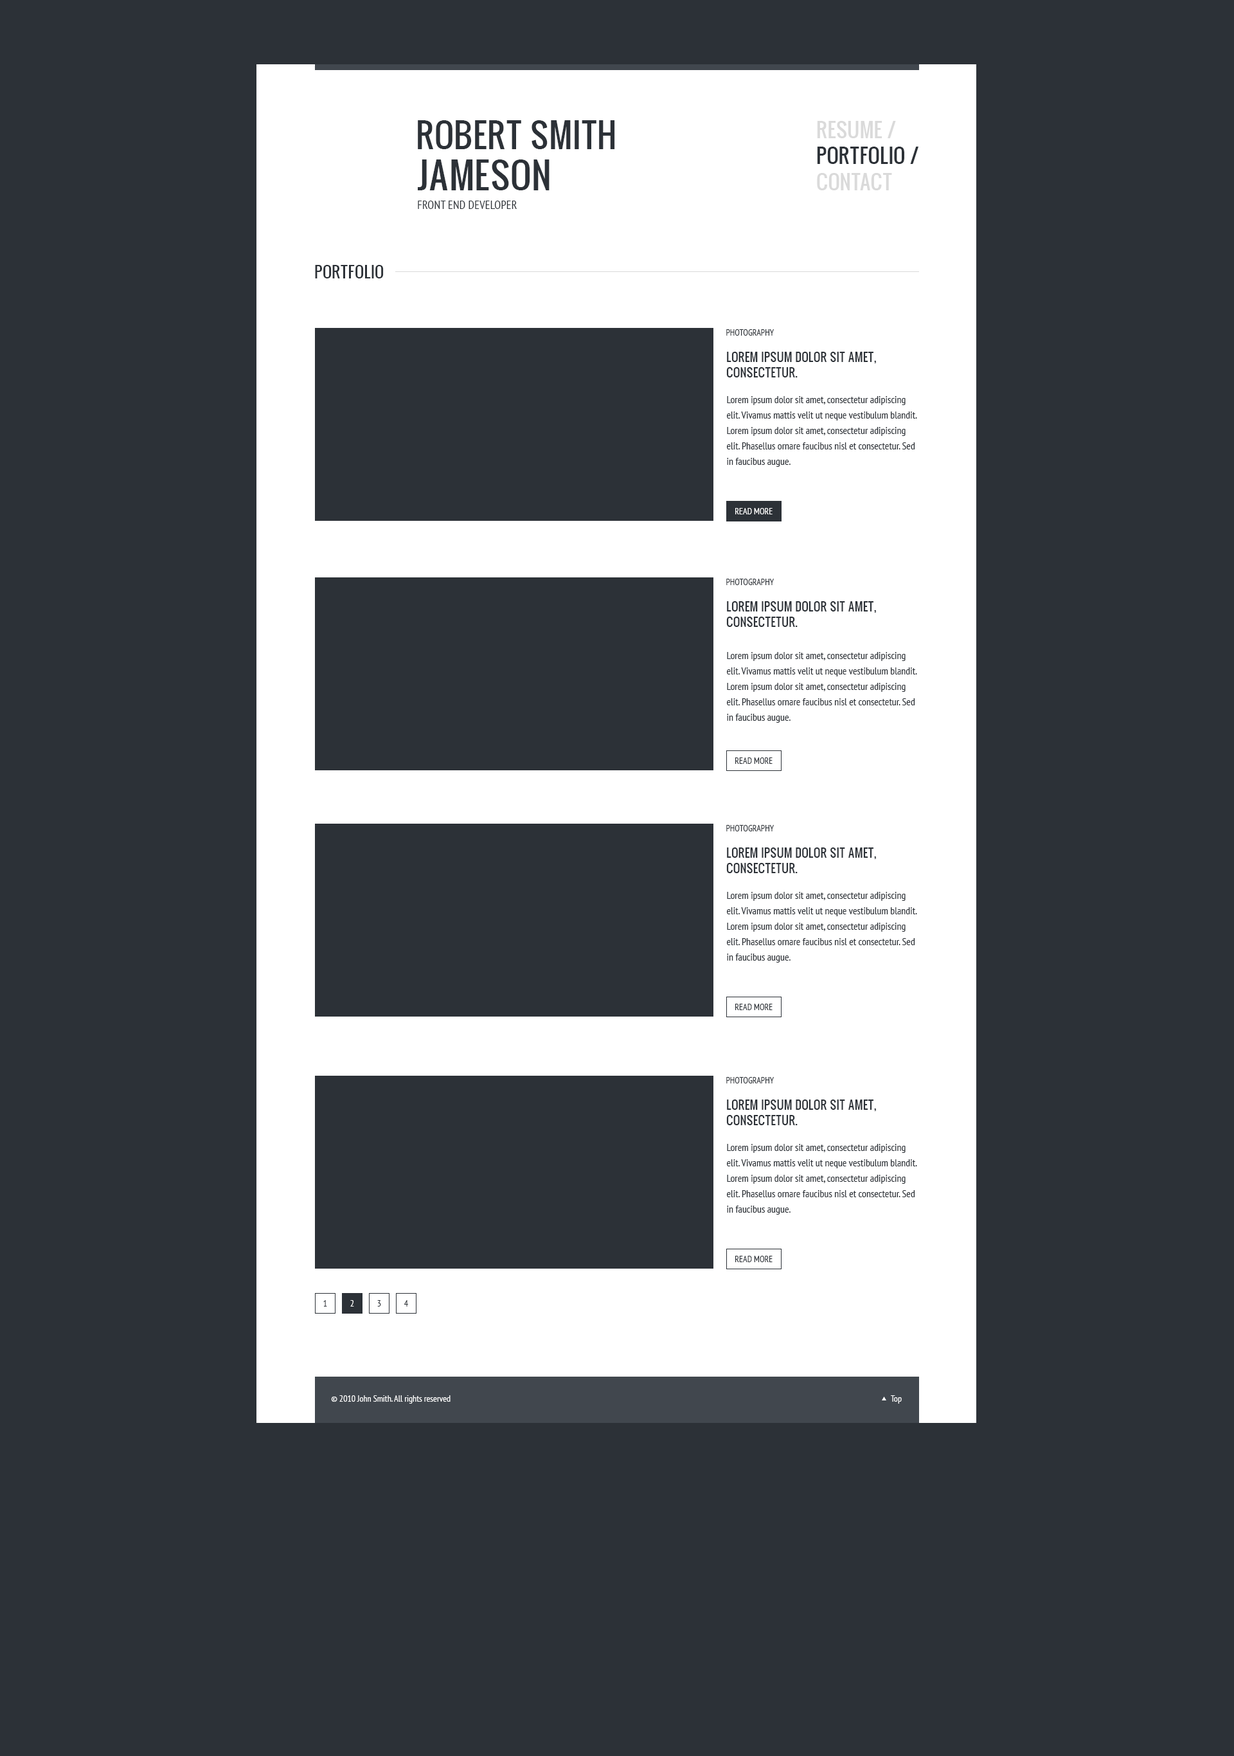
<style>
.page{position:relative;width:1234px;height:1756px;background:#2c3137}
.page>*{position:absolute;margin:0}
.t1{font:32.8px "Oswald";color:#2c3137;text-transform:uppercase}
.t2{font:19.7px/26.2px "Oswald";color:#2c3137}
.t3{font:19.7px/26.2px "Oswald";color:#dadada}
.t4{font:35.6px "Oswald";color:#2c3137;text-transform:uppercase}
.t5{font:35.6px "Oswald";color:#222222;text-transform:uppercase}
.t6{font:11.9px "PTSans-Narrow";color:#2c3137}
.t7{font:15.4px "Oswald";color:#2c3137}
.t8{font:9px "PTSans-Narrow";color:#2c3137;text-transform:uppercase}
.t9{font:11.6px/15.4px "Oswald";color:#2c3137;text-transform:uppercase}
.t10{font:10.3px/15.4px "PTSans-Narrow";color:#2c3137}
.t11{font:9px "PTSans-Narrow";color:#ffffff}
.t12{font:9px "PTSans-Narrow";color:#2c3137}
</style>
<div class="page">
<p class="t1" style="left:418px;top:120px;width:197px;height:29px">ROBERT Smith</p>
<p class="t2" style="left:817px;top:121px;width:102px;height:69px"><span class="t3">RESUME /  <br></span>PORTFOLIO / <br><span class="t3">CONTACT</span></p>
<p class="t4" style="left:418px;top:159px;width:132px;height:31px"><span class="t5"><br></span>jAMESON</p>
<p class="t6" style="left:418px;top:201px;width:99px;height:8px">FRONT END DEVELOPER</p>
<p class="t7" style="left:315px;top:265px;width:69px;height:13px">PORTFOLIO</p>
<p class="t8" style="left:726px;top:329px;width:49px;height:7px">photography</p>
<p class="t9" style="left:726px;top:352px;width:150px;height:25px">Lorem ipsum dolor sit amet, <br>consectetur.</p>
<p class="t10" style="left:727px;top:396px;width:190px;height:71px">Lorem ipsum dolor sit amet, consectetur adipiscing elit. Vivamus mattis velit ut neque vestibulum blandit. Lorem ipsum dolor sit amet, consectetur adipiscing elit. Phasellus ornare faucibus nisl et consectetur. Sed in faucibus augue.</p>
<p class="t11" style="left:735px;top:508px;width:38px;height:6px">READ MORE</p>
<p class="t8" style="left:726px;top:579px;width:49px;height:6px">photography</p>
<p class="t9" style="left:726px;top:601px;width:150px;height:26px">Lorem ipsum dolor sit amet, <br>consectetur.</p>
<p class="t10" style="left:727px;top:652px;width:190px;height:71px">Lorem ipsum dolor sit amet, consectetur adipiscing elit. Vivamus mattis velit ut neque vestibulum blandit. Lorem ipsum dolor sit amet, consectetur adipiscing elit. Phasellus ornare faucibus nisl et consectetur. Sed in faucibus augue.</p>
<p class="t12" style="left:735px;top:757px;width:38px;height:7px">READ MORE</p>
<p class="t8" style="left:726px;top:825px;width:49px;height:6px">photography</p>
<p class="t9" style="left:726px;top:847px;width:150px;height:26px">Lorem ipsum dolor sit amet, <br>consectetur.</p>
<p class="t10" style="left:727px;top:892px;width:190px;height:70px">Lorem ipsum dolor sit amet, consectetur adipiscing elit. Vivamus mattis velit ut neque vestibulum blandit. Lorem ipsum dolor sit amet, consectetur adipiscing elit. Phasellus ornare faucibus nisl et consectetur. Sed in faucibus augue.</p>
<p class="t12" style="left:735px;top:1004px;width:38px;height:6px">READ MORE</p>
<p class="t8" style="left:726px;top:1077px;width:49px;height:6px">photography</p>
<p class="t9" style="left:726px;top:1099px;width:150px;height:26px">Lorem ipsum dolor sit amet, <br>consectetur.</p>
<p class="t10" style="left:727px;top:1144px;width:190px;height:70px">Lorem ipsum dolor sit amet, consectetur adipiscing elit. Vivamus mattis velit ut neque vestibulum blandit. Lorem ipsum dolor sit amet, consectetur adipiscing elit. Phasellus ornare faucibus nisl et consectetur. Sed in faucibus augue.</p>
<p class="t12" style="left:735px;top:1256px;width:38px;height:6px">READ MORE</p>
<p class="t12" style="left:323px;top:1300px;width:4px;height:6px">1</p>
<p class="t11" style="left:350px;top:1300px;width:4px;height:6px">2</p>
<p class="t12" style="left:377px;top:1300px;width:4px;height:6px">3</p>
<p class="t12" style="left:404px;top:1300px;width:4px;height:6px">4</p>
<p class="t11" style="left:331px;top:1395px;width:120px;height:8px">© 2010 John Smith. All rights reserved</p>
<p class="t11" style="left:891px;top:1395px;width:11px;height:8px">Top</p>
</div>
